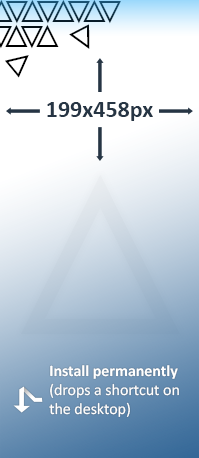
<style>
.page{position:relative;width:199px;height:458px;background:#ffffff}
.page>*{position:absolute;margin:0}
.t1{font:32px "MSReferenceSansSerif"}
.t2{font:32px "MSReferenceSansSerif";color:#000000}
.t3{font:24px "Calibri-Bold";color:#263544}
.t4{font:229.3px "MSReferenceSansSerif"}
.t5{font:16px "Calibri";color:#ffffff}
.t6{font:16px "Calibri-Bold";color:#ffffff}
</style>
<div class="page">
<p class="t1" style="left:5px;top:1px;width:23px;height:23px;rotate:180deg">△</p>
<p class="t1" style="left:21px;top:0px;width:23px;height:22px">△</p>
<p class="t1" style="left:36px;top:1px;width:23px;height:23px;rotate:180deg">△</p>
<p class="t1" style="left:52px;top:0px;width:23px;height:22px">△</p>
<p class="t1" style="left:67px;top:1px;width:23px;height:23px;rotate:180deg">△</p>
<p class="t1" style="left:83px;top:0px;width:23px;height:22px">△</p>
<p class="t1" style="left:98px;top:1px;width:23px;height:23px;rotate:180deg">△</p>
<p class="t2" style="left:5px;top:24px;width:23px;height:23px">△</p>
<p class="t2" style="left:20px;top:26px;width:23px;height:23px;rotate:180deg">△</p>
<p class="t2" style="left:36px;top:24px;width:23px;height:23px">△</p>
<p class="t2" style="left:69px;top:24px;width:21px;height:25px;rotate:153deg">△</p>
<p class="t2" style="left:5px;top:55px;width:24px;height:23px;rotate:50deg">△</p>
<p class="t3" style="left:47px;top:102px;width:106px;height:19px">199x458px</p>
<p class="t4" style="left:21px;top:175px;width:159px;height:159px">△</p>
<p class="t5" style="left:49px;top:365px;width:130px;height:52px"><span class="t6">Install permanently<br></span>(drops a shortcut on<br>the desktop)</p>
</div>
